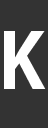
<style>
.page{position:relative;width:48px;height:128px;background:#333333}
.page>*{position:absolute;margin:0}
.t1{font:75px "AdobeGothicStd-Bold";color:#ffffff}
</style>
<div class="page">
<p class="t1" style="left:4px;top:31px;width:42px;height:58px">K</p>
</div>
